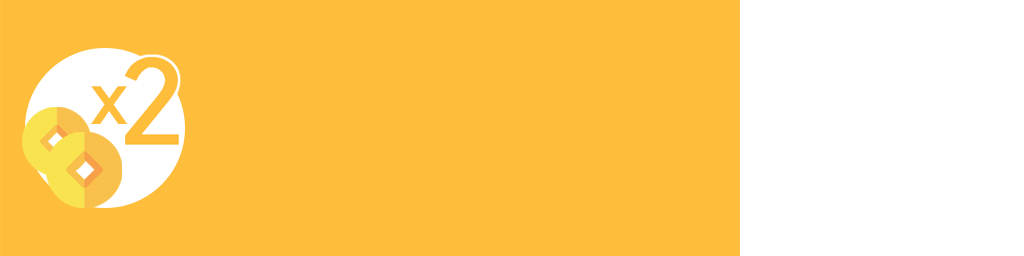
<style>
.page{position:relative;width:1024px;height:256px;background:#ffbd3c}
.page>*{position:absolute;margin:0}
.t1{font:75px "HCRDotum-Bold";letter-spacing:0.05em;color:#ffbd3c}
</style>
<div class="page">
<p class="t1" style="left:91px;top:86px;width:37px;height:38px">x</p>
</div>
